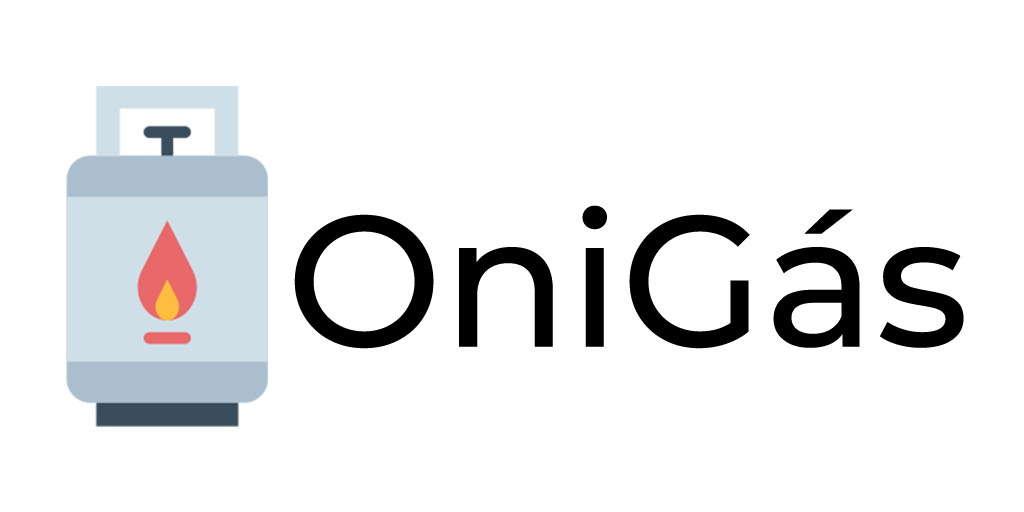
<style>
.page{position:relative;width:1024px;height:512px;background:#ffffff}
.page>*{position:absolute;margin:0}
.t1{font:186px "Montserrat-Medium";color:#000000}
</style>
<div class="page">
<p class="t1" style="left:294px;top:205px;width:670px;height:144px">OniGás</p>
</div>
